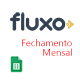
<style>
.page{position:relative;width:80px;height:80px;background:#ffffff}
.page>*{position:absolute;margin:0}
.t1{font:9.6px/9.6px "SegoeUI";letter-spacing:-0.01em;color:#ff0000}
</style>
<div class="page">
<p class="t1" style="left:22px;top:39px;width:50px;height:17px;text-align:right">Fechamento<br>Mensal</p>
</div>
